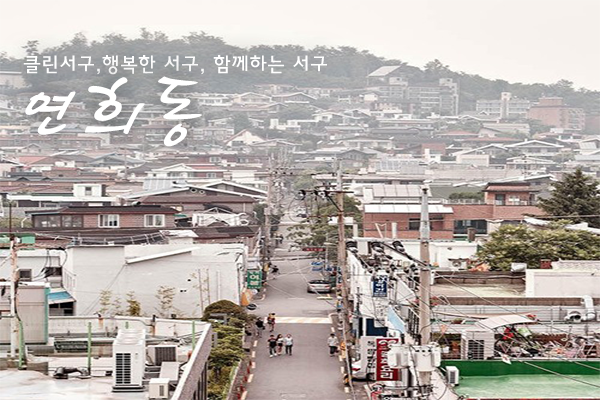
<style>
.page{position:relative;width:600px;height:400px}
.page>*{position:absolute;margin:0}
.t1{font:20px "HaanYGodic23";color:#ffffff}
.t2{font:100px "HaanCjaB";color:#ffffff}
</style>
<div class="page">
<p class="t1" style="left:23px;top:55px;width:304px;height:20px">클린서구,행복한 서구, 함께하는 서구</p>
<p class="t2" style="left:25px;top:76px;width:177px;height:71px">연희동</p>
</div>
